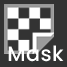
<style>
.page{position:relative;width:67px;height:67px;background:#333333}
.page>*{position:absolute;margin:0}
.t1{font:20.8px "Poppins-Medium";letter-spacing:0.02em;color:#ffffff}
</style>
<div class="page">
<p class="t1" style="left:8px;top:45px;width:56px;height:17px">Mask</p>
</div>
